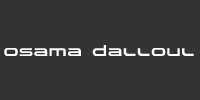
<style>
.page{position:relative;width:200px;height:100px;background:#333333}
.page>*{position:absolute;margin:0}
.t1{font:14px "Spaceman";color:#ffffff}
</style>
<div class="page">
<p class="t1" style="left:4px;top:45px;width:190px;height:11px">Osama Dalloul</p>
</div>
